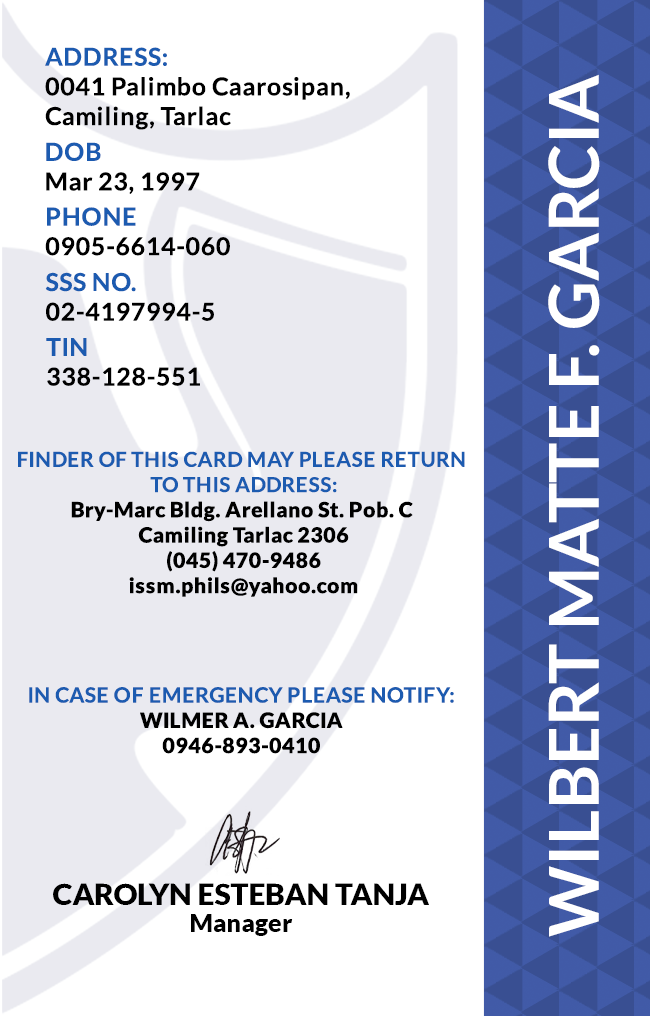
<style>
.page{position:relative;width:650px;height:1016px;background:#ffffff}
.page>*{position:absolute;margin:0}
.t1{font:24.7px/29.6px "Lato-Bold";letter-spacing:0.025em;color:#000000}
.t2{font:24.7px/29.6px "Lato-Bold";letter-spacing:0.025em;color:#1c5bb0}
.t3{font:68.8px "Lato-Bold";color:#ffffff}
.t4{font:21.1px "Lato-Black";letter-spacing:0.025em}
.t5{font:20.5px/25.3px "Lato-Bold";letter-spacing:0.025em;text-transform:uppercase}
.t6{font:21.1px/25.3px "Lato-Bold";letter-spacing:0.025em;color:#1c5bb0}
.t7{font:21.1px "Lato-Black";letter-spacing:0.025em;color:#000000}
.t8{font:29.5px "Lato-Black";color:#000000}
.t9{font:25px "Lato-Black";color:#000000}
</style>
<div class="page">
<p class="t1" style="left:45px;top:47px;width:305px;height:83px"><span class="t2">ADDRESS:<br></span>0041 Palimbo Caarosipan,<br>Camiling, Tarlac</p>
<p class="t3" style="left:548px;top:74px;width:52px;height:863px;rotate:-90deg">WILBERT MATTE F. GARCIA</p>
<p class="t1" style="left:46px;top:142px;width:154px;height:52px"><span class="t2">DOB<br></span>Mar 23, 1997</p>
<p class="t1" style="left:45px;top:207px;width:185px;height:49px"><span class="t2">PHONE <br></span>0905-6614-060</p>
<p class="t1" style="left:45px;top:272px;width:169px;height:49px"><span class="t2">SSS NO.<br></span>02-4197994-5</p>
<p class="t1" style="left:46px;top:338px;width:154px;height:48px"><span class="t2">TIN<br></span>338-128-551</p>
<p class="t4" style="left:18px;top:451px;width:447px;height:146px;text-align:center"><span class="t5">Finder of this card may please return <br>to this address:<br></span>Bry-Marc Bldg. Arellano St. Pob. C <br>Camiling Tarlac 2306<br>(045) 470-9486<br>issm.phils@yahoo.com</p>
<p class="t6" style="left:29px;top:687px;width:425px;height:67px;text-align:center">IN CASE OF EMERGENCY PLEASE NOTIFY:<br><span class="t7">WILMER A. GARCIA<br>0946-893-0410</span></p>
<p class="t8" style="left:53px;top:883px;width:376px;height:22px">CAROLYN ESTEBAN TANJA</p>
<p class="t9" style="left:191px;top:914px;width:102px;height:22px">Manager</p>
</div>
